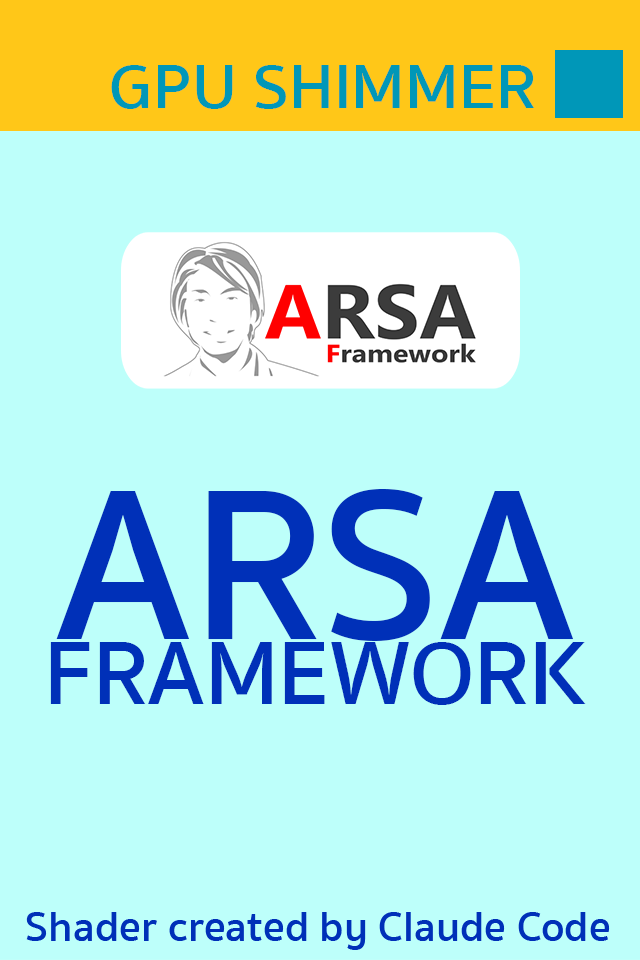
<style>
.page{position:relative;width:640px;height:960px;background:#bdfffa}
.page>*{position:absolute;margin:0}
.t1{font:63.9px "SukhumvitSet-SemiBold";color:#0097b8;scale:1.05 1}
.t2{font:91.9px/65.2px "SukhumvitSet-SemiBold";color:#0030b8}
.t3{font:220px/65.2px "SukhumvitSet-SemiBold";color:#0030b8}
</style>
<div class="page">
<p class="t1" style="left:111px;top:65px;width:423px;height:44px">GPU SHIMMER</p>
<p class="t2" style="left:50px;top:489px;width:536px;height:216px;text-align:center"><span class="t3">ARSA<br></span>FRAMEWORK</p>
</div>
